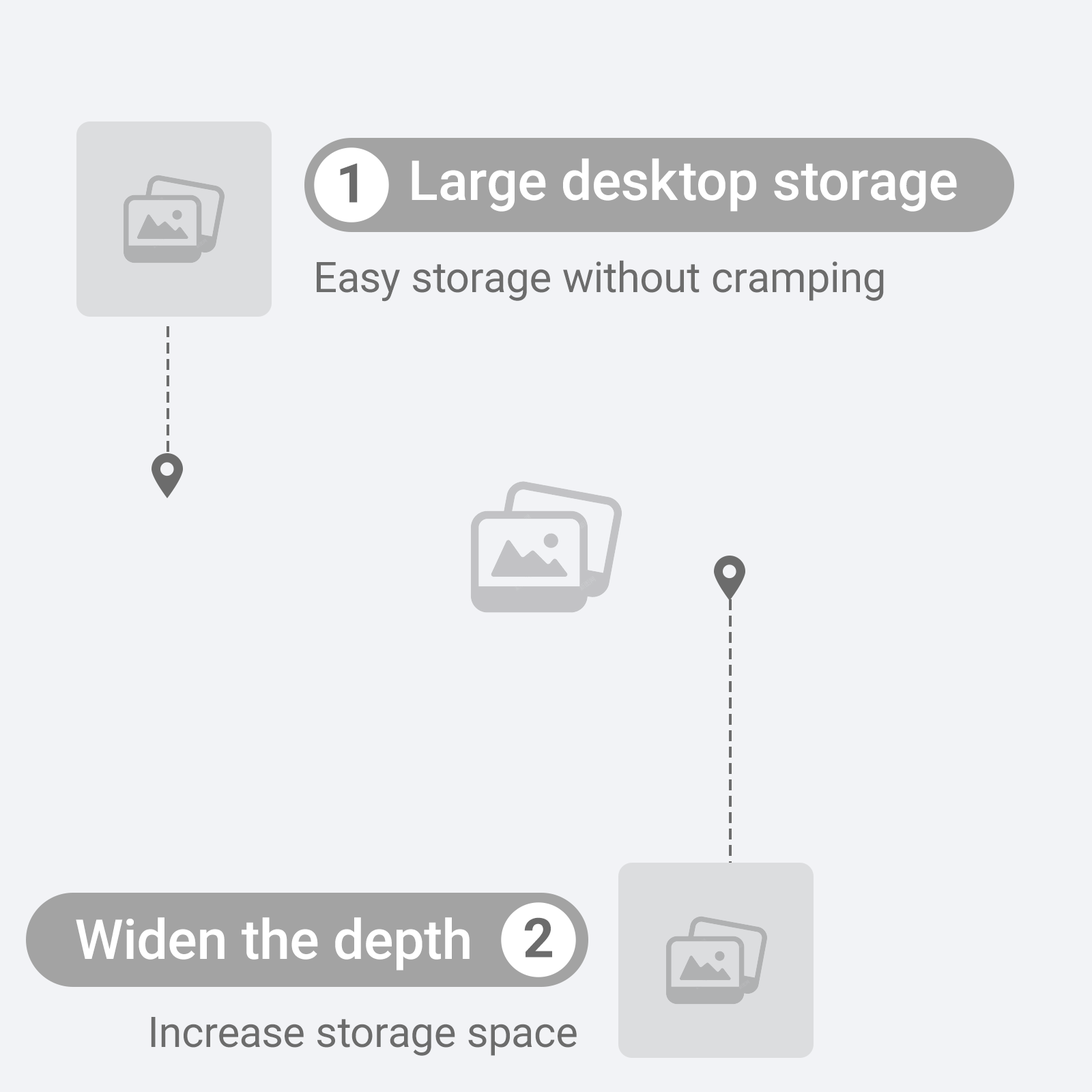
<style>
.page{position:relative;width:1092px;height:1092px;background:#f2f3f6}
.page>*{position:absolute;margin:0}
.t1{font:55.3px "Roboto-Medium";color:#ffffff}
.t2{font:54.6px "Roboto-Bold";color:#6c6c6c}
.t3{font:42.2px "Roboto-Regular";color:#6c6c6c}
</style>
<div class="page">
<p class="t1" style="left:412px;top:158px;width:545px;height:54px">Large desktop storage</p>
<p class="t2" style="left:340px;top:163px;width:18px;height:40px">1</p>
<p class="t3" style="left:317px;top:260px;width:567px;height:42px">Easy storage without cramping</p>
<p class="t1" style="left:76px;top:917px;width:394px;height:54px">Widen the depth</p>
<p class="t2" style="left:524px;top:917px;width:28px;height:41px">2</p>
<p class="t3" style="left:151px;top:1017px;width:426px;height:39px">Increase storage space</p>
</div>
